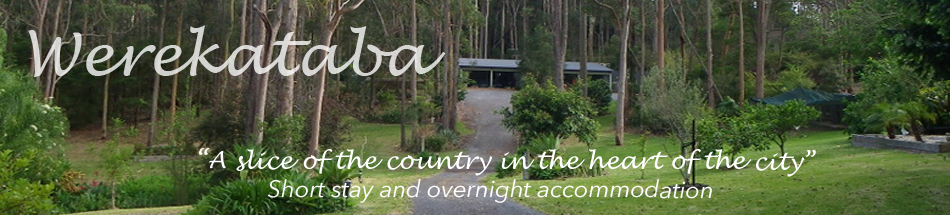
<style>
.page{position:relative;width:950px;height:215px}
.page>*{position:absolute;margin:0}
.t1{font:58.6px "LucidaHandwriting-Italic";color:#d5d5d2}
.t2{font:23.5px "LucidaHandwriting-Italic";color:#ffffff}
.t3{font:23.5px "AvenirNext-Italic";color:#ffffff}
</style>
<div class="page">
<p class="t1" style="left:28px;top:25px;width:418px;height:52px">Werekataba</p>
<p class="t2" style="left:199px;top:148px;width:617px;height:55px">“A slice of the country in the heart of the city”<br><span class="t3">  Short stay and overnight accommodation</span></p>
</div>
